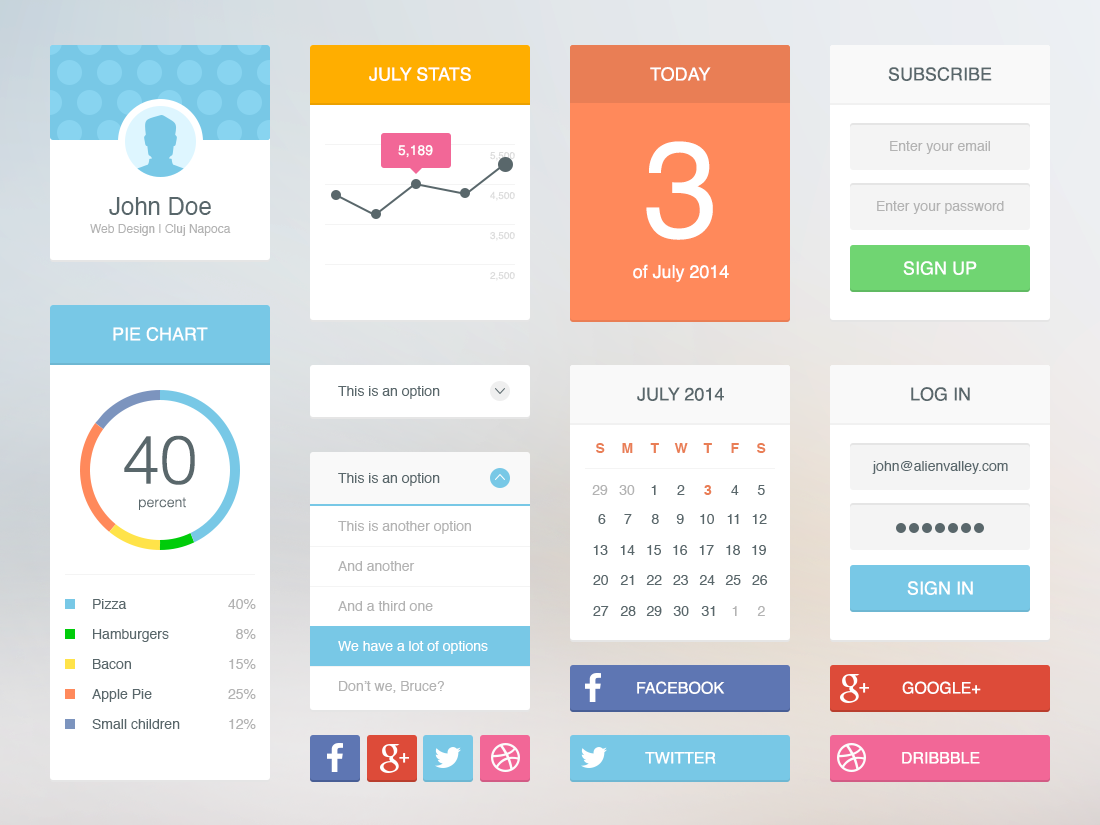
<style>
.page{position:relative;width:1100px;height:825px;background:#ffffff}
.page>*{position:absolute;margin:0}
.t1{font:18px "Helvetica";color:#ffffff}
.t2{font:18px "Helvetica";color:#59676b}
.t3{font:14px "Helvetica";color:#ffffff}
.t4{font:18px/41px "Helvetica";color:#ffffff}
.t5{font:136.2px "Helvetica";color:#ffffff}
.t6{font:14px "Helvetica";color:#b3b3b3}
.t7{font:24px "Helvetica";color:#59676b}
.t8{font:10px "Helvetica";color:#dcdcdc}
.t9{font:12px "Helvetica";color:#b3b3b3}
.t10{font:14px "Helvetica";color:#59676b}
.t11{font:68px "Helvetica-Light";color:#59676b}
.t12{font:14px "Helvetica-Bold";color:#e97e55}
.t13{font:14px "Helvetica-Light";color:#59676b}
.t14{font:16px "Helvetica";color:#ffffff}
</style>
<div class="page">
<p class="t1" style="left:369px;top:67px;width:102px;height:14px">JULY STATS</p>
<p class="t1" style="left:650px;top:67px;width:61px;height:14px">TODAY</p>
<p class="t2" style="left:888px;top:67px;width:104px;height:14px">SUBSCRIBE</p>
<p class="t3" style="left:398px;top:145px;width:35px;height:13px">5,189</p>
<p class="t4" style="left:633px;top:141px;width:96px;height:141px;text-align:center"><span class="t5">3<br></span>of July 2014</p>
<p class="t6" style="left:890px;top:141px;width:100px;height:13px">Enter your email</p>
<p class="t7" style="left:109px;top:197px;width:102px;height:18px">John Doe</p>
<p class="t8" style="left:490px;top:191px;width:25px;height:10px">4,500</p>
<p class="t6" style="left:877px;top:201px;width:127px;height:13px">Enter your password</p>
<p class="t9" style="left:90px;top:224px;width:141px;height:12px">Web Design | Cluj Napoca</p>
<p class="t8" style="left:490px;top:231px;width:25px;height:10px">3,500</p>
<p class="t1" style="left:903px;top:261px;width:74px;height:14px">SIGN UP</p>
<p class="t8" style="left:490px;top:271px;width:25px;height:10px">2,500</p>
<p class="t1" style="left:113px;top:327px;width:95px;height:14px">PIE CHART</p>
<p class="t10" style="left:338px;top:386px;width:102px;height:13px">This is an option</p>
<p class="t2" style="left:637px;top:387px;width:87px;height:14px">JULY 2014</p>
<p class="t2" style="left:911px;top:387px;width:59px;height:14px">LOG IN</p>
<p class="t11" style="left:124px;top:435px;width:71px;height:50px">40</p>
<p class="t12" style="left:596px;top:443px;width:9px;height:10px">S</p>
<p class="t12" style="left:622px;top:443px;width:11px;height:10px">M</p>
<p class="t12" style="left:650px;top:443px;width:9px;height:10px">T</p>
<p class="t12" style="left:674px;top:443px;width:14px;height:10px">W</p>
<p class="t12" style="left:703px;top:443px;width:9px;height:10px">T</p>
<p class="t12" style="left:731px;top:443px;width:8px;height:10px">F</p>
<p class="t12" style="left:757px;top:443px;width:9px;height:10px">S</p>
<p class="t10" style="left:872px;top:461px;width:136px;height:13px">john@alienvalley.com</p>
<p class="t10" style="left:338px;top:473px;width:102px;height:13px">This is an option</p>
<p class="t6" style="left:592px;top:485px;width:16px;height:10px">29</p>
<p class="t6" style="left:619px;top:485px;width:16px;height:10px">30</p>
<p class="t10" style="left:651px;top:485px;width:5px;height:10px">1</p>
<p class="t10" style="left:677px;top:485px;width:8px;height:10px">2</p>
<p class="t12" style="left:704px;top:485px;width:8px;height:10px">3</p>
<p class="t10" style="left:731px;top:485px;width:8px;height:10px">4</p>
<p class="t10" style="left:757px;top:485px;width:8px;height:10px">5</p>
<p class="t13" style="left:139px;top:497px;width:47px;height:13px">percent</p>
<p class="t6" style="left:338px;top:521px;width:133px;height:13px">This is another option</p>
<p class="t10" style="left:598px;top:514px;width:8px;height:10px">6</p>
<p class="t10" style="left:624px;top:514px;width:8px;height:10px">7</p>
<p class="t10" style="left:651px;top:514px;width:8px;height:10px">8</p>
<p class="t10" style="left:676px;top:514px;width:8px;height:10px">9</p>
<p class="t10" style="left:700px;top:514px;width:14px;height:10px">10</p>
<p class="t10" style="left:727px;top:514px;width:12px;height:10px">11</p>
<p class="t10" style="left:752px;top:514px;width:15px;height:10px">12</p>
<p class="t10" style="left:593px;top:545px;width:15px;height:10px">13</p>
<p class="t10" style="left:620px;top:545px;width:15px;height:10px">14</p>
<p class="t10" style="left:647px;top:545px;width:14px;height:10px">15</p>
<p class="t10" style="left:673px;top:545px;width:15px;height:10px">16</p>
<p class="t10" style="left:699px;top:545px;width:15px;height:10px">17</p>
<p class="t10" style="left:726px;top:545px;width:14px;height:10px">18</p>
<p class="t10" style="left:752px;top:545px;width:14px;height:10px">19</p>
<p class="t6" style="left:338px;top:561px;width:77px;height:10px">And another</p>
<p class="t10" style="left:593px;top:575px;width:15px;height:10px">20</p>
<p class="t10" style="left:620px;top:575px;width:14px;height:10px">21</p>
<p class="t10" style="left:646px;top:575px;width:16px;height:10px">22</p>
<p class="t10" style="left:673px;top:575px;width:16px;height:10px">23</p>
<p class="t10" style="left:699px;top:575px;width:16px;height:10px">24</p>
<p class="t10" style="left:725px;top:575px;width:16px;height:10px">25</p>
<p class="t10" style="left:752px;top:575px;width:16px;height:10px">26</p>
<p class="t1" style="left:907px;top:581px;width:66px;height:14px">SIGN IN</p>
<p class="t10" style="left:93px;top:599px;width:34px;height:10px">Pizza</p>
<p class="t6" style="left:228px;top:599px;width:28px;height:10px">40%</p>
<p class="t6" style="left:338px;top:601px;width:95px;height:10px">And a third one</p>
<p class="t10" style="left:593px;top:606px;width:16px;height:10px">27</p>
<p class="t10" style="left:620px;top:606px;width:16px;height:10px">28</p>
<p class="t10" style="left:646px;top:606px;width:16px;height:10px">29</p>
<p class="t10" style="left:673px;top:606px;width:16px;height:10px">30</p>
<p class="t10" style="left:701px;top:606px;width:14px;height:10px">31</p>
<p class="t6" style="left:732px;top:606px;width:5px;height:10px">1</p>
<p class="t6" style="left:757px;top:606px;width:8px;height:10px">2</p>
<p class="t10" style="left:93px;top:629px;width:76px;height:13px">Hamburgers</p>
<p class="t6" style="left:236px;top:629px;width:20px;height:10px">8%</p>
<p class="t3" style="left:338px;top:641px;width:150px;height:13px">We have a lot of options</p>
<p class="t10" style="left:93px;top:659px;width:38px;height:10px">Bacon</p>
<p class="t6" style="left:229px;top:659px;width:27px;height:10px">15%</p>
<p class="t10" style="left:92px;top:689px;width:60px;height:13px">Apple Pie</p>
<p class="t6" style="left:228px;top:689px;width:28px;height:10px">25%</p>
<p class="t6" style="left:339px;top:681px;width:105px;height:12px">Don’t we, Bruce?</p>
<p class="t14" style="left:637px;top:681px;width:88px;height:13px">FACEBOOK</p>
<p class="t14" style="left:902px;top:681px;width:79px;height:13px">GOOGLE+</p>
<p class="t10" style="left:92px;top:719px;width:88px;height:10px">Small children</p>
<p class="t6" style="left:229px;top:719px;width:27px;height:10px">12%</p>
<p class="t14" style="left:645px;top:752px;width:71px;height:12px">TWITTER</p>
<p class="t14" style="left:902px;top:752px;width:78px;height:12px">DRIBBBLE</p>
</div>
